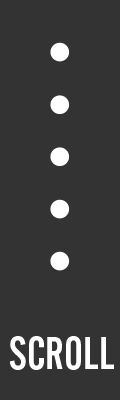
<style>
.page{position:relative;width:120px;height:400px;background:#333333}
.page>*{position:absolute;margin:0}
.t1{font:48.1px "AlternateGotNo2D";color:#ffffff}
</style>
<div class="page">
<p class="t1" style="left:9px;top:336px;width:105px;height:34px">SCROLL</p>
</div>
